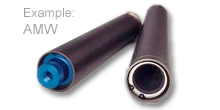
<style>
.page{position:relative;width:220px;height:110px;background:#ffffff}
.page>*{position:absolute;margin:0}
.t1{font:12.5px "ArialMT";color:#a6a5a5}
.t2{font:13.9px "ArialMT";color:#a6a5a5}
</style>
<div class="page">
<p class="t1" style="left:23px;top:8px;width:51px;height:26px">Example:<br><span class="t2">AMW</span></p>
</div>
